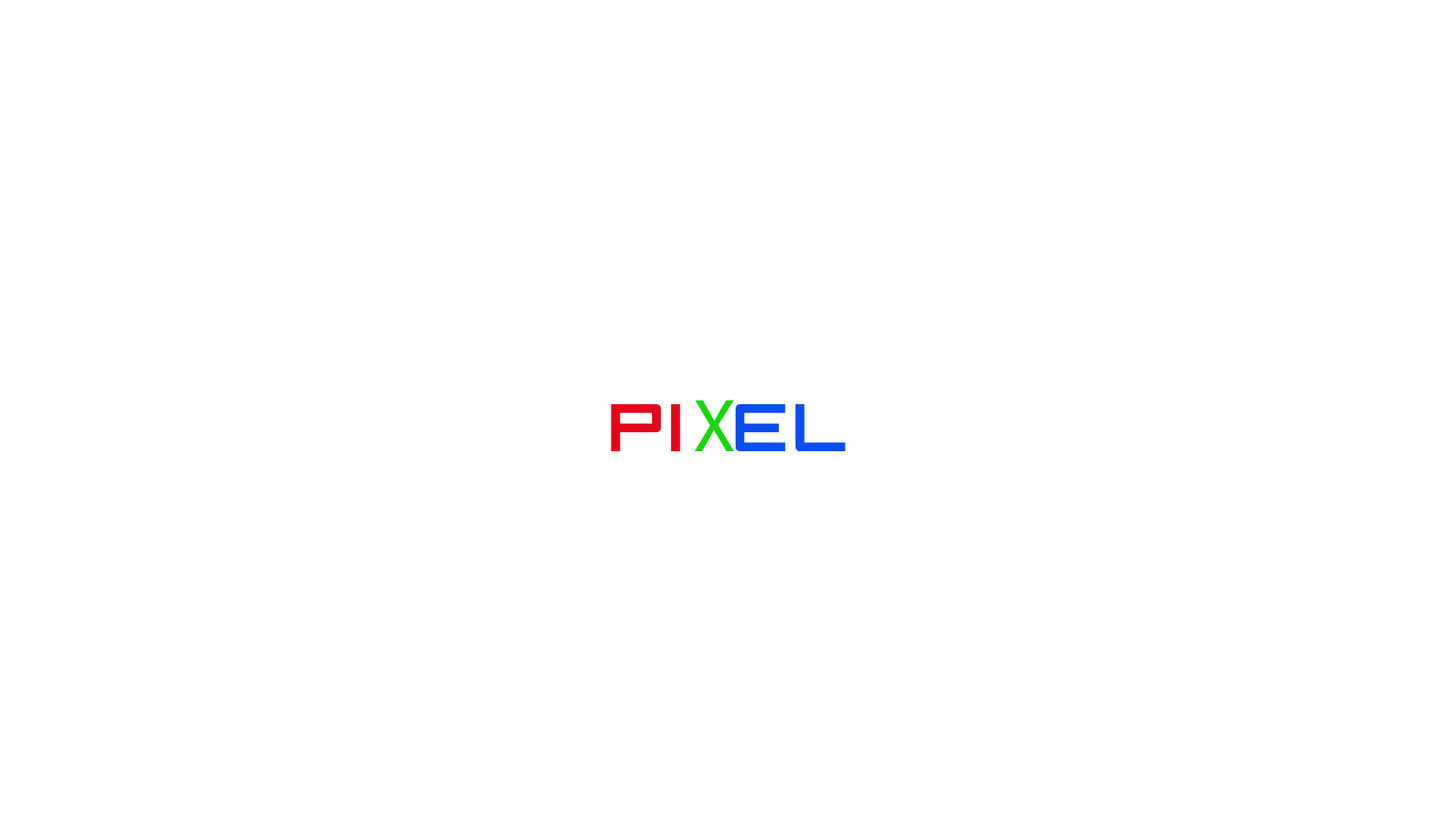
<style>
.page{position:relative;width:1456px;height:819px;background:#ffffff}
.page>*{position:absolute;margin:0}
.t1{font:75.8px "QUBE";color:#e3061b}
.t2{font:75.8px "MyriadPro-Regular";color:#18d60a}
.t3{font:75.8px "QUBE";color:#0c4df0}
</style>
<div class="page">
<p class="t1" style="left:611px;top:400px;width:235px;height:51px">Pi<span class="t2">X</span><span class="t3">el</span></p>
</div>
